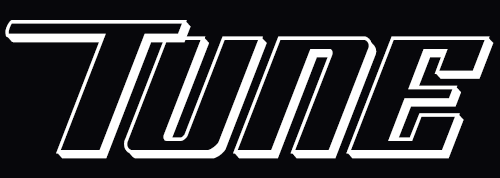
<style>
.page{position:relative;width:500px;height:178px;background:#07070b}
.page>*{position:absolute;margin:0}
.t1{font:181.5px "RocketPop3D";color:#ffffff;font-weight:bold;scale:0.87 1}
</style>
<div class="page">
<p class="t1" style="left:5px;top:20px;width:489px;height:139px">Tune</p>
</div>
